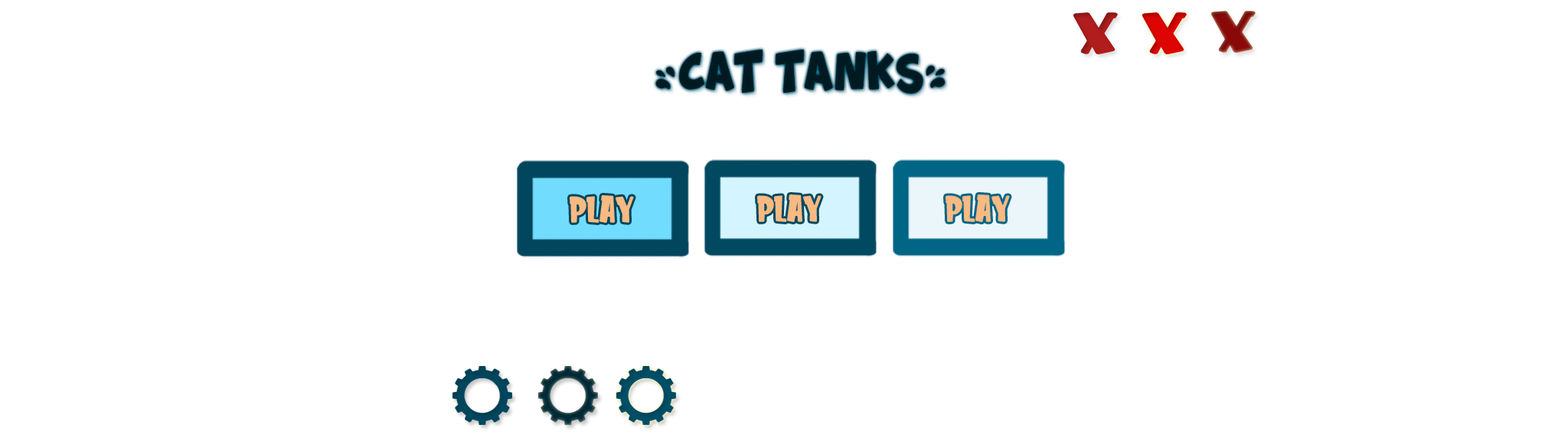
<style>
.page{position:relative;width:1568px;height:441px;background:#ffffff}
.page>*{position:absolute;margin:0}
.t1{font:57.1px "KidsZone";color:#b11c1c;scale:1.56 1}
.t2{font:57.1px "KidsZone";color:#de0404;scale:1.56 1}
.t3{font:57.1px "KidsZone";color:#890c0b;scale:1.56 1}
.t4{font:30.6px "Splatch";color:#011a22}
.t5{font:35.8px "KidsZone";color:#f9b982}
</style>
<div class="page">
<p class="t1" style="left:1073px;top:12px;width:45px;height:42px">x</p>
<p class="t2" style="left:1142px;top:12px;width:45px;height:42px">x</p>
<p class="t3" style="left:1211px;top:11px;width:45px;height:42px">x</p>
<p class="t4" style="left:655px;top:49px;width:290px;height:44px">&lt;CAT TANKS&gt;</p>
<p class="t5" style="left:570px;top:195px;width:64px;height:28px">play</p>
<p class="t5" style="left:757px;top:194px;width:65px;height:28px">play</p>
<p class="t5" style="left:946px;top:194px;width:64px;height:28px">play</p>
</div>
